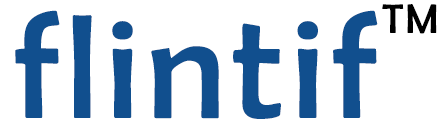
<style>
.page{position:relative;width:447px;height:132px;background:#ffffff}
.page>*{position:absolute;margin:0}
.t1{font:41.7px "BerlinSansFB-Reg";letter-spacing:0.05em;color:#000000}
.t2{font:150px "BerlinSansFB-Reg";letter-spacing:0.05em;color:#114f8e}
</style>
<div class="page">
<p class="t1" style="left:382px;top:4px;width:55px;height:30px">TM</p>
<p class="t2" style="left:15px;top:10px;width:363px;height:109px">flintif</p>
</div>
